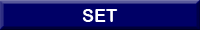
<style>
.page{position:relative;width:200px;height:30px;background:#000066}
.page>*{position:absolute;margin:0}
.t1{font:18px "ArialRoundedMTBold";color:#ffffff}
</style>
<div class="page">
<p class="t1" style="left:82px;top:9px;width:36px;height:13px">SET</p>
</div>
